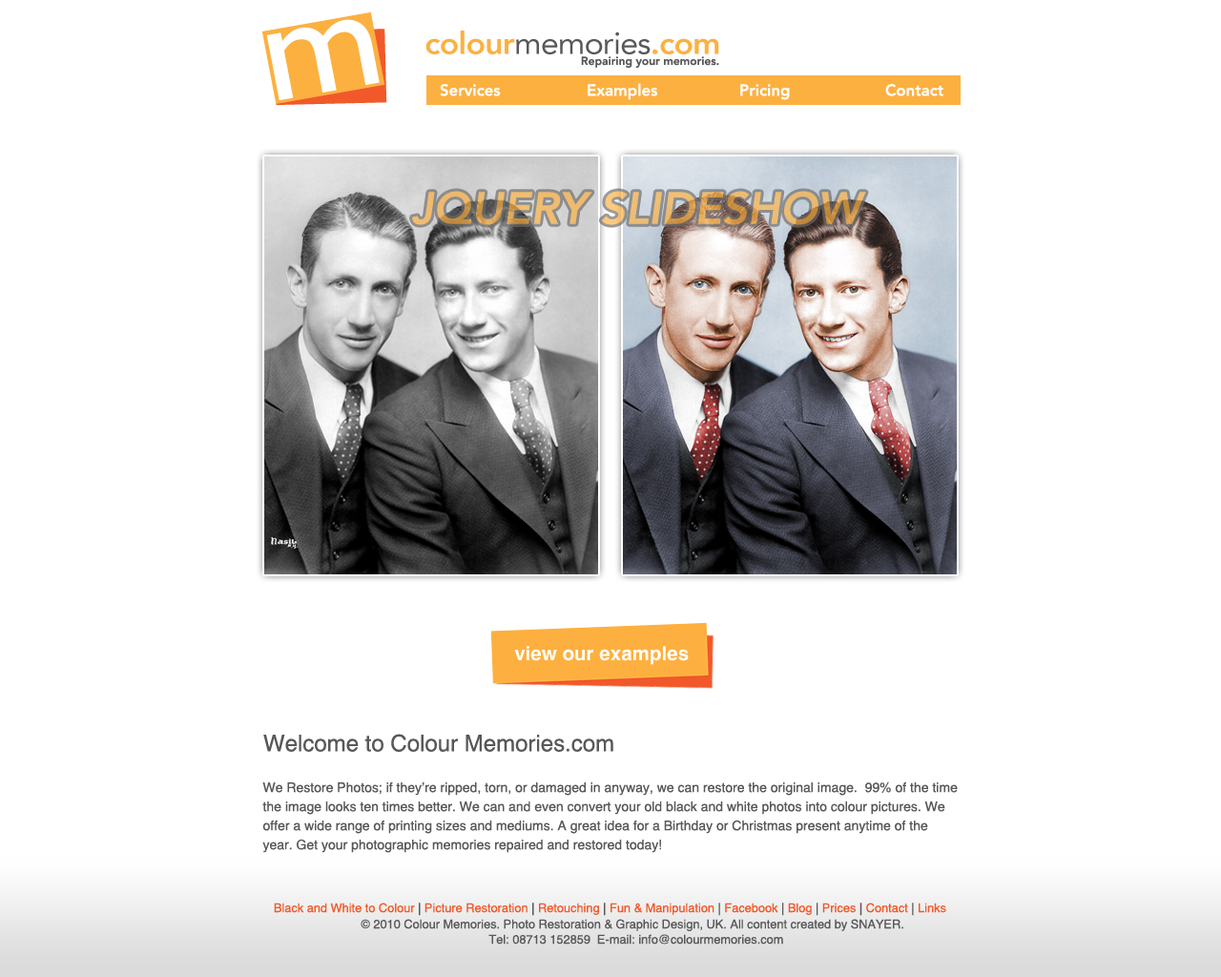
<style>
.page{position:relative;width:1221px;height:977px;background:#ffffff}
.page>*{position:absolute;margin:0}
.t1{font:44.5px "AvenirLT-HeavyOblique"}
.t2{font:22.9px "HelveticaCE-Regular";color:#58585a}
.t3{font:13.4px/19.1px "HelveticaCE-Regular";color:#58585a}
.t4{font:12.2px "HelveticaCE-Regular";color:#f1592a}
.t5{font:12.2px "HelveticaCE-Regular";color:#58585a}
</style>
<div class="page">
<p class="t1" style="left:412px;top:191px;width:454px;height:34px">JQUERY SLIDESHOW</p>
<p class="t2" style="left:263px;top:733px;width:350px;height:19px">Welcome to Colour Memories.com</p>
<p class="t3" style="left:262px;top:781px;width:696px;height:72px">We Restore Photos; if they’re ripped, torn, or damaged in anyway, we can restore the original image.  99% of the time the image looks ten times better. We can and even convert your old black and white photos into colour pictures. We offer a wide range of printing sizes and mediums. A great idea for a Birthday or Christmas present anytime of the year. Get your photographic memories repaired and restored today!</p>
<p class="t4" style="left:274px;top:902px;width:672px;height:14px">Black and White to Colour<span class="t5"> | </span>Picture Restoration<span class="t5"> | </span>Retouching<span class="t5"> | </span>Fun &amp; Manipulation <span class="t5">| </span>Facebook<span class="t5"> | </span>Blog<span class="t5"> | </span>Prices<span class="t5"> | </span>Contact<span class="t5"> | </span>Links</p>
<p class="t5" style="left:361px;top:919px;width:542px;height:12px">© 2010 Colour Memories. Photo Restoration &amp; Graphic Design, UK. All content created by SNAYER.</p>
<p class="t5" style="left:488px;top:934px;width:295px;height:10px">Tel: 08713 152859  E-mail: info@colourmemories.com</p>
</div>
